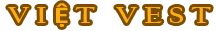
<style>
.page{position:relative;width:216px;height:31px;background:#ffffff}
.page>*{position:absolute;margin:0}
.t1{font:24px "CalifornianFB-Bold";color:#feae13;scale:1.27 1}
.t2{font:24px "Calibri-Bold";color:#feae13;scale:1.27 1}
</style>
<div class="page">
<p class="t1" style="left:8px;top:3px;width:203px;height:24px">V I <span class="t2">Ệ </span>T   V E S T</p>
</div>
